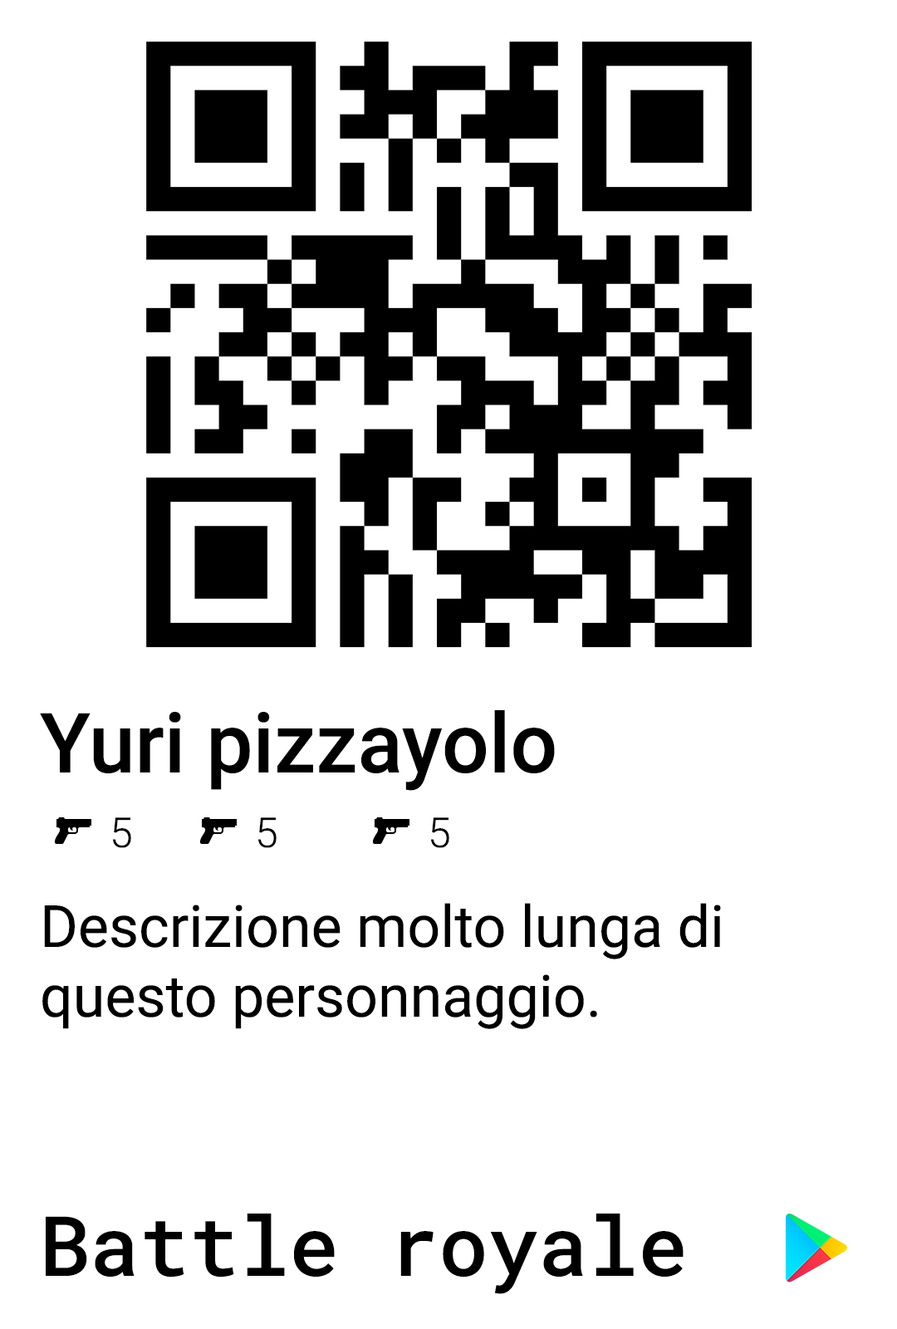
<style>
.page{position:relative;width:897px;height:1329px;background:#ffffff}
.page>*{position:absolute;margin:0}
.t1{font:83.1px "Roboto-Medium";color:#000000}
.t2{font:41.5px "Roboto-Light";color:#000000}
.t3{font:58.1px "Roboto-Regular";color:#000000}
.t4{font:83.1px "RobotoMono-Medium";color:#000000}
</style>
<div class="page">
<p class="t1" style="left:40px;top:710px;width:515px;height:81px">Yuri pizzayolo</p>
<p class="t2" style="left:113px;top:817px;width:18px;height:31px">5</p>
<p class="t2" style="left:258px;top:817px;width:19px;height:31px">5</p>
<p class="t2" style="left:431px;top:817px;width:18px;height:31px">5</p>
<p class="t3" style="left:42px;top:903px;width:679px;height:126px;text-align:right">Descrizione molto lunga di<br>questo personnaggio.</p>
<p class="t4" style="left:46px;top:1214px;width:638px;height:80px">Battle royale</p>
</div>
